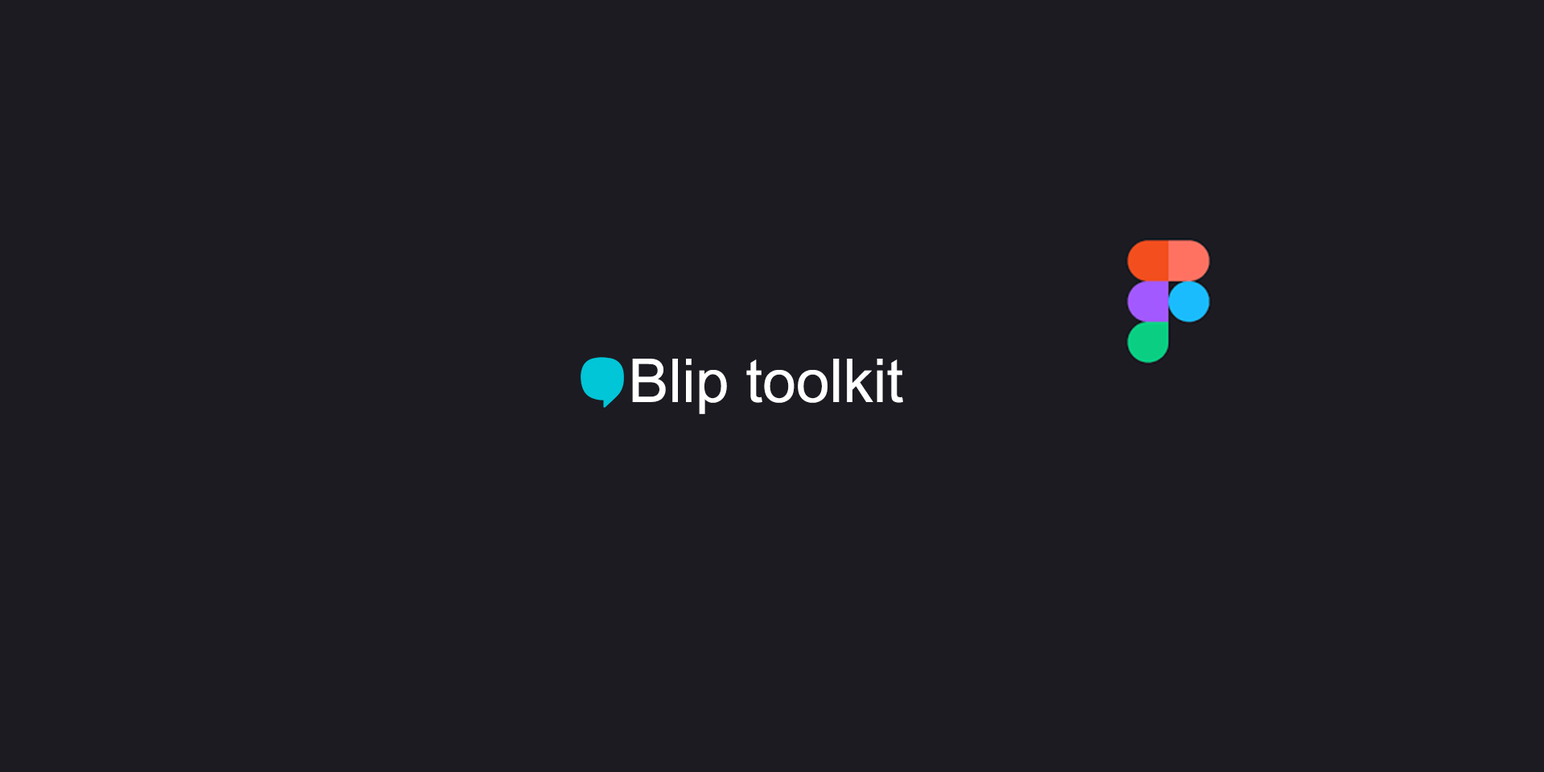
<style>
.page{position:relative;width:1544px;height:772px;background:#1c1b22}
.page>*{position:absolute;margin:0}
.t1{font:60.3px "ArialMT";color:#ffffff}
</style>
<div class="page">
<p class="t1" style="left:632px;top:359px;width:271px;height:55px">Blip toolkit</p>
</div>
